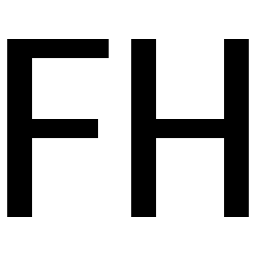
<style>
.page{position:relative;width:256px;height:256px;background:#ffffff}
.page>*{position:absolute;margin:0}
.t1{font:250px "RobotoCondensed-Regular";color:#000000}
</style>
<div class="page">
<p class="t1" style="left:7px;top:39px;width:242px;height:178px">FH</p>
</div>
